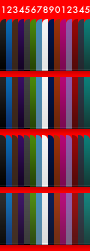
<style>
.page{position:relative;width:90px;height:251px}
.page>*{position:absolute;margin:0}
.t1{font:9px "Futura-Medium"}
.t2{font:9px "Futura-Medium";color:#ffffff}
</style>
<div class="page">
<p class="t1" style="left:2px;top:6px;width:3px;height:7px">1</p>
<p class="t2" style="left:7px;top:6px;width:5px;height:7px">2</p>
<p class="t2" style="left:13px;top:6px;width:5px;height:7px">3</p>
<p class="t2" style="left:19px;top:5px;width:5px;height:8px">4</p>
<p class="t2" style="left:24px;top:6px;width:6px;height:7px">5</p>
<p class="t2" style="left:31px;top:6px;width:5px;height:7px">6</p>
<p class="t1" style="left:37px;top:6px;width:6px;height:7px">7</p>
<p class="t2" style="left:43px;top:6px;width:5px;height:7px">8</p>
<p class="t1" style="left:49px;top:6px;width:5px;height:7px">9</p>
<p class="t2" style="left:55px;top:6px;width:5px;height:7px">0</p>
<p class="t1" style="left:62px;top:6px;width:3px;height:7px">1</p>
<p class="t2" style="left:67px;top:6px;width:5px;height:7px">2</p>
<p class="t2" style="left:73px;top:6px;width:5px;height:7px">3</p>
<p class="t2" style="left:79px;top:5px;width:5px;height:8px">4</p>
<p class="t2" style="left:84px;top:6px;width:6px;height:7px">5</p>
</div>
